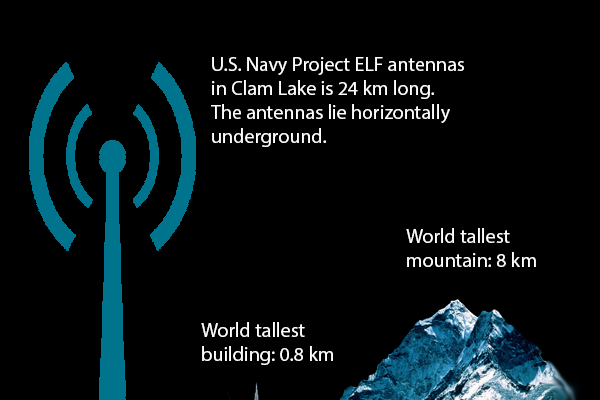
<style>
.page{position:relative;width:600px;height:400px;background:#000000}
.page>*{position:absolute;margin:0}
.t1{font:20px "MyriadPro-Regular";color:#ffffff}
</style>
<div class="page">
<p class="t1" style="left:211px;top:57px;width:253px;height:90px">U.S. Navy Project ELF antennas<br>in Clam Lake is 24 km long.<br>The antennas lie horizontally <br>underground.</p>
<p class="t1" style="left:406px;top:228px;width:130px;height:39px">World tallest <br>mountain: 8 km</p>
<p class="t1" style="left:201px;top:322px;width:132px;height:43px">World tallest <br>building: 0.8 km</p>
</div>
